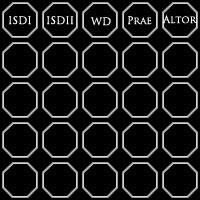
<style>
.page{position:relative;width:200px;height:200px;background:#000000}
.page>*{position:absolute;margin:0}
.t1{font:10px "TrajanPro-Regular";color:#ffffff}
</style>
<div class="page">
<p class="t1" style="left:9px;top:16px;width:22px;height:9px">ISDI</p>
<p class="t1" style="left:47px;top:16px;width:27px;height:9px">ISDII</p>
<p class="t1" style="left:90px;top:17px;width:21px;height:9px">WD</p>
<p class="t1" style="left:127px;top:16px;width:25px;height:9px">Prae</p>
<p class="t1" style="left:162px;top:15px;width:35px;height:9px">Altor</p>
</div>
